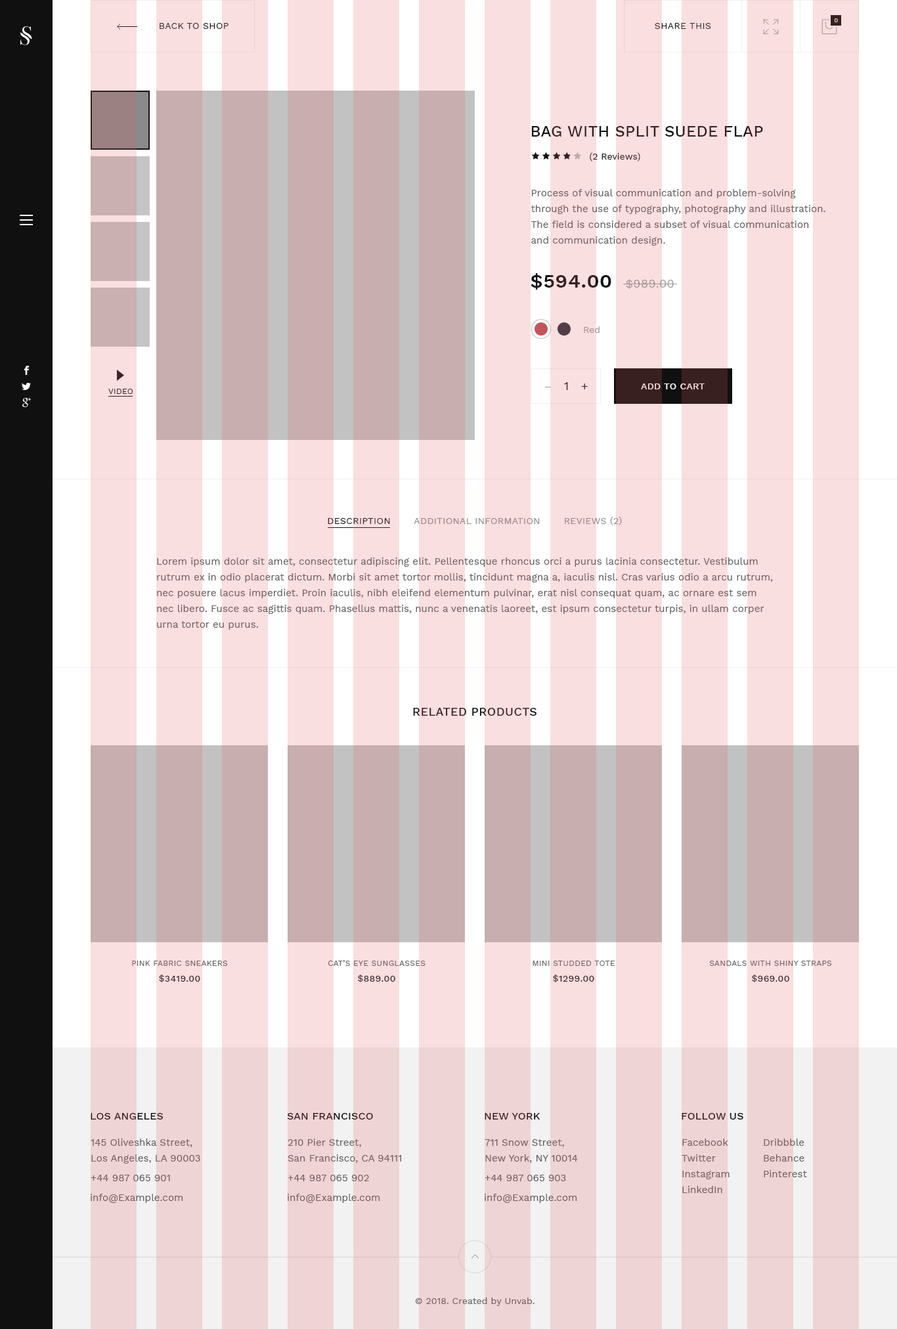
<style>
.page{position:relative;width:897px;height:1329px;background:#f9dfdf}
.page>*{position:absolute;margin:0}
.t1{font:9.2px "WorkSans-Regular";letter-spacing:0.025em;text-transform:uppercase}
.t2{font:5.9px "WorkSans-Regular";letter-spacing:0.025em;color:#f9dfdf;text-transform:uppercase}
.t3{font:15.8px "WorkSans-Medium";letter-spacing:0.01em;text-transform:uppercase}
.t4{font:9.2px "WorkSans-Regular";letter-spacing:0.005em}
.t5{font:9.9px/15.8px "WorkSans-Regular";letter-spacing:0.005em}
.t6{font:19.7px "WorkSans-SemiBold";letter-spacing:0.025em;text-transform:uppercase}
.t7{font:11.8px "WorkSans-Regular";letter-spacing:0.025em;text-transform:uppercase}
.t8{font:9.2px "WorkSans-Regular";letter-spacing:0.005em;color:#9c9c9c}
.t9{font:7.9px "WorkSans-Regular";letter-spacing:0.025em;color:#392020;text-transform:uppercase}
.t10{font:11.8px "WorkSans-Regular";letter-spacing:0.005em;color:#9c9c9c}
.t11{font:11.8px "WorkSans-Regular";letter-spacing:0.005em;color:#392020}
.t12{font:9.2px "WorkSans-Medium";letter-spacing:0.025em;text-transform:uppercase}
.t13{font:9.2px "WorkSans-Regular";letter-spacing:0.025em;color:#8e8e8e;text-transform:uppercase}
.t14{font:9.2px "WorkSans-Regular";letter-spacing:0.025em;color:#101010;text-transform:uppercase}
.t15{font:11.8px "WorkSans-Medium";letter-spacing:0.025em;color:#392020;text-transform:uppercase}
.t16{font:7.9px/19.7px "WorkSans-Regular";letter-spacing:0.025em}
.t17{font:9.2px/15.8px "WorkSans-Medium";letter-spacing:0.025em}
.t18{font:10.5px "WorkSans-Medium";letter-spacing:0.01em;text-transform:uppercase}
.t19{font:10.5px "WorkSans-Medium";letter-spacing:0.01em;color:#381e1e;text-transform:uppercase}
.t20{font:9.9px/15.8px "WorkSans-Regular";letter-spacing:0.005em;color:#795f5f}
.t21{font:9.9px "WorkSans-Regular";letter-spacing:0.005em;color:#795f5f}
.t22{font:9.2px "WorkSans-Regular";letter-spacing:0.005em;color:#795f5f}
</style>
<div class="page">
<p class="t1" style="left:160px;top:23px;width:69px;height:6px">back to shop</p>
<p class="t1" style="left:655px;top:23px;width:56px;height:6px">share this</p>
<p class="t2" style="left:835px;top:18px;width:3px;height:4px">0</p>
<p class="t3" style="left:531px;top:126px;width:232px;height:11px">Bag with split suede flap</p>
<p class="t4" style="left:590px;top:152px;width:50px;height:10px">(2 Reviews)</p>
<p class="t5" style="left:531px;top:189px;width:295px;height:57px">Process of visual communication and problem-solving <br>through the use of typography, photography and illustration. <br>The field is considered a subset of visual communication <br>and communication design.</p>
<p class="t6" style="left:531px;top:273px;width:143px;height:17px">$594.00  <span class="t7">$989.00</span></p>
<p class="t8" style="left:584px;top:326px;width:16px;height:7px">Red</p>
<p class="t9" style="left:108px;top:389px;width:25px;height:5px">video</p>
<p class="t10" style="left:544px;top:387px;width:7px;height:0px">−</p>
<p class="t11" style="left:564px;top:382px;width:4px;height:8px">1</p>
<p class="t11" style="left:581px;top:384px;width:7px;height:5px">+</p>
<p class="t12" style="left:641px;top:384px;width:64px;height:5px">add to cart</p>
<p class="t13" style="left:328px;top:516px;width:294px;height:9px"><span class="t14">Description       </span>Additional Information       Reviews (2)</p>
<p class="t5" style="left:157px;top:558px;width:616px;height:72px">Lorem ipsum dolor sit amet, consectetur adipiscing elit. Pellentesque rhoncus orci a purus lacinia consectetur. Vestibulum <br>rutrum ex in odio placerat dictum. Morbi sit amet tortor mollis, tincidunt magna a, iaculis nisl. Cras varius odio a arcu rutrum, <br>nec posuere lacus imperdiet. Proin iaculis, nibh eleifend elementum pulvinar, erat nisl consequat quam, ac ornare est sem <br>nec libero. Fusce ac sagittis quam. Phasellus mattis, nunc a venenatis laoreet, est ipsum consectetur turpis, in ullam corper <br>urna tortor eu purus.</p>
<p class="t15" style="left:413px;top:708px;width:124px;height:8px">related products</p>
<p class="t16" style="left:132px;top:961px;width:96px;height:21px;text-align:center">PINK FABRIC SNEAKERS<br><span class="t17">$3419.00</span></p>
<p class="t16" style="left:328px;top:960px;width:98px;height:22px;text-align:center">CAT’S EYE SUNGLASSES<br><span class="t17">$889.00</span></p>
<p class="t16" style="left:533px;top:961px;width:82px;height:21px;text-align:center">MINI STUDDED TOTE<br><span class="t17">$1299.00</span></p>
<p class="t16" style="left:709px;top:961px;width:123px;height:21px;text-align:center">SANDALS WITH SHINY STRAPS<br><span class="t17">$969.00</span></p>
<p class="t18" style="left:91px;top:1113px;width:72px;height:7px">los angeles</p>
<p class="t19" style="left:287px;top:1113px;width:86px;height:7px">San Francisco</p>
<p class="t19" style="left:485px;top:1113px;width:55px;height:7px">New York</p>
<p class="t19" style="left:682px;top:1113px;width:61px;height:7px">follow us</p>
<p class="t20" style="left:91px;top:1139px;width:109px;height:25px">145 Oliveshka Street, <br>Los Angeles, LA 90003</p>
<p class="t20" style="left:288px;top:1139px;width:113px;height:24px">210 Pier Street,<br>San Francisco, CA 94111</p>
<p class="t20" style="left:485px;top:1139px;width:93px;height:24px">711 Snow Street, <br>New York, NY 10014</p>
<p class="t20" style="left:682px;top:1139px;width:48px;height:54px">Facebook<br>Twitter<br>Instagram<br>LinkedIn</p>
<p class="t20" style="left:764px;top:1139px;width:43px;height:39px">Dribbble<br>Behance<br>Pinterest</p>
<p class="t21" style="left:91px;top:1175px;width:79px;height:6px">+44 987 065 901</p>
<p class="t21" style="left:288px;top:1175px;width:81px;height:6px">+44 987 065 902</p>
<p class="t21" style="left:485px;top:1175px;width:81px;height:6px">+44 987 065 903</p>
<p class="t21" style="left:91px;top:1194px;width:92px;height:9px">info@Example.com</p>
<p class="t21" style="left:288px;top:1194px;width:92px;height:9px">info@Example.com</p>
<p class="t21" style="left:485px;top:1194px;width:92px;height:9px">info@Example.com</p>
<p class="t22" style="left:415px;top:1298px;width:120px;height:8px">© 2018. Created by Unvab.</p>
</div>
